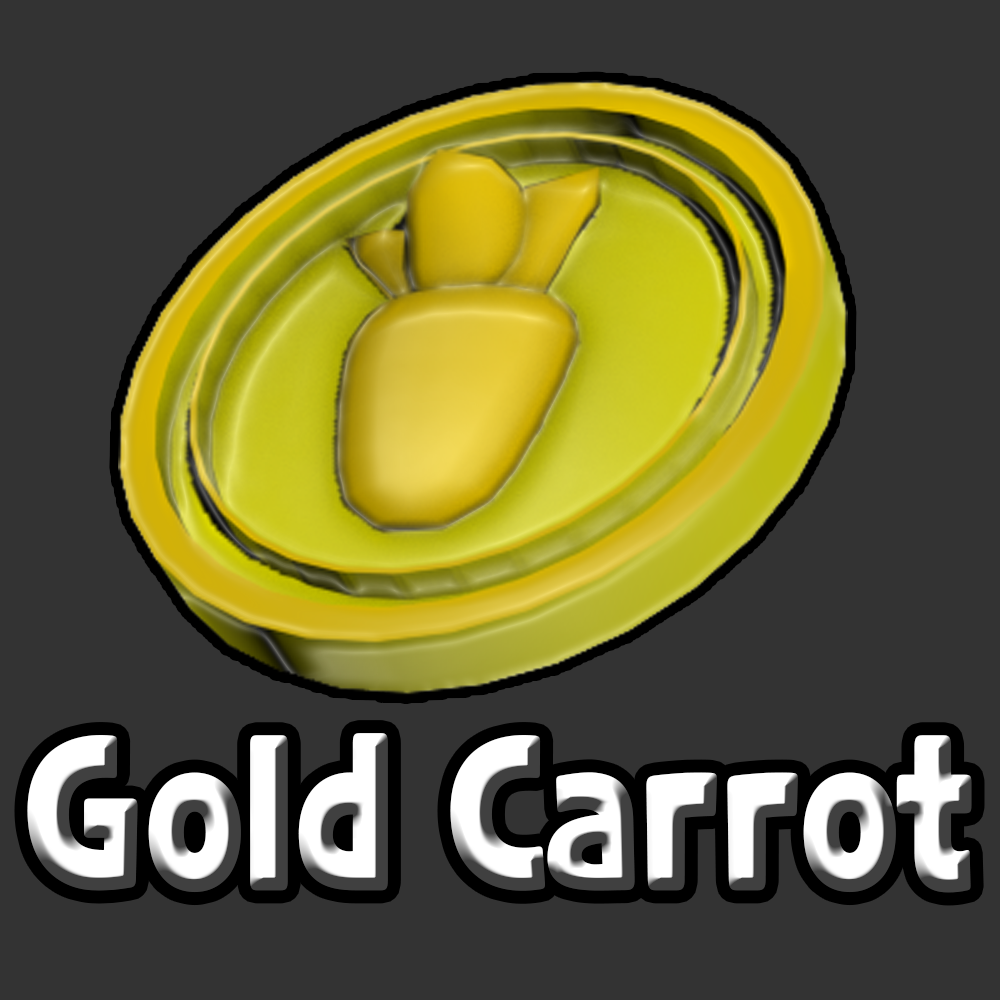
<style>
.page{position:relative;width:1000px;height:1000px;background:#333333}
.page>*{position:absolute;margin:0}
.t1{font:210.9px "CookieRunOTF-Black";scale:0.83 1}
</style>
<div class="page">
<p class="t1" style="left:27px;top:733px;width:945px;height:160px">Gold Carrot</p>
</div>
